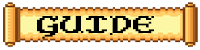
<style>
.page{position:relative;width:200px;height:50px;background:#ffffff}
.page>*{position:absolute;margin:0}
.t1{font:30px "Medieval-Pixel";color:#000000;scale:1.39 1}
</style>
<div class="page">
<p class="t1" style="left:37px;top:16px;width:117px;height:23px">GUIDE</p>
</div>
